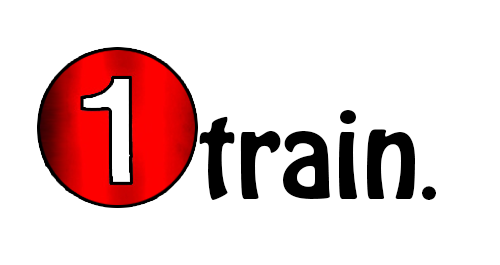
<style>
.page{position:relative;width:500px;height:265px;background:#ffffff}
.page>*{position:absolute;margin:0}
.t1{font:104.2px "HoboStd";color:#000000}
.t2{font:62.5px "HoboStd";color:#000000}
</style>
<div class="page">
<p class="t1" style="left:199px;top:110px;width:237px;height:90px">train<span class="t2">.</span></p>
</div>
